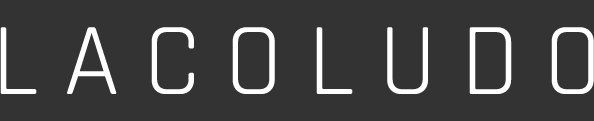
<style>
.page{position:relative;width:594px;height:121px;background:#333333}
.page>*{position:absolute;margin:0}
.t1{font:103.7px "Rajdhani-Regular";letter-spacing:0.24em;color:#ffffff;text-transform:uppercase}
</style>
<div class="page">
<p class="t1" style="left:0px;top:27px;width:594px;height:67px">lacoludo</p>
</div>
